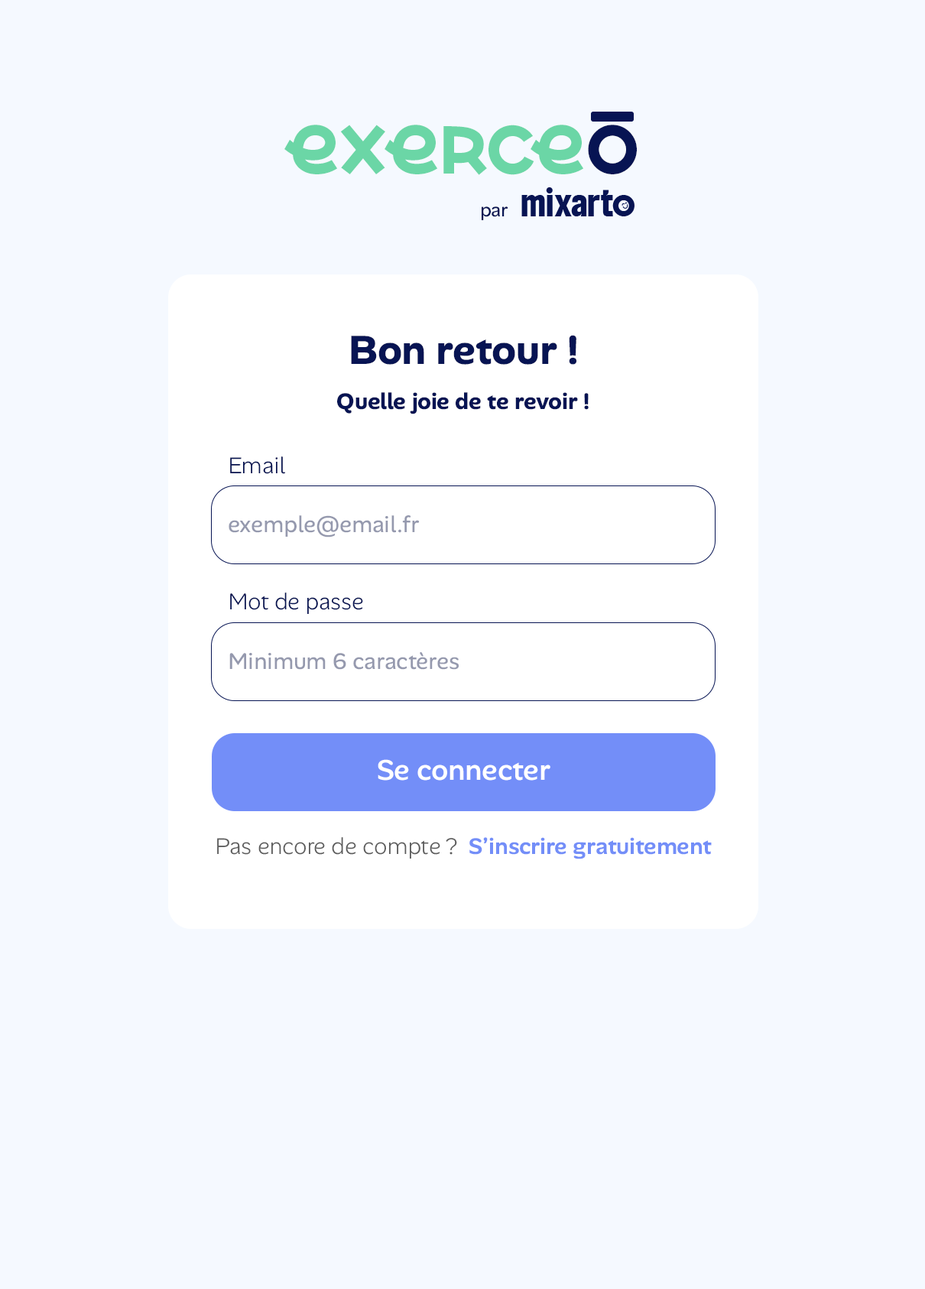
<style>
.page{position:relative;width:925px;height:1289px;background:#f5f9ff}
.page>*{position:absolute;margin:0}
.t1{font:67.8px "MoveSans-Bold";color:#6bd6a6}
.t2{font:67.8px "MoveSans-Bold";color:#071453}
.t3{font:19px "AlanSans-Regular";color:#071453}
.t4{font:41.3px "AlanSans-Bold";color:#071453}
.t5{font:23px "AlanSans-Bold";color:#071453}
.t6{font:23px "AlanSans-Light";color:#071453}
.t7{font:23px "AlanSans-Regular";color:#9599ae}
.t8{font:29.1px "AlanSans-Medium";color:#ffffff}
.t9{font:23px "AlanSans-SemiBold";color:#738ef8}
.t10{font:23px "AlanSans-Light";color:#5b5b5b}
</style>
<div class="page">
<p class="t1" style="left:284px;top:125px;width:353px;height:50px">exerce<span class="t2">o</span></p>
<p class="t3" style="left:482px;top:206px;width:26px;height:14px">par</p>
<p class="t4" style="left:351px;top:335px;width:225px;height:30px">Bon retour !</p>
<p class="t5" style="left:337px;top:392px;width:252px;height:22px">Quelle joie de te revoir !</p>
<p class="t6" style="left:230px;top:456px;width:55px;height:18px">Email</p>
<p class="t7" style="left:229px;top:515px;width:191px;height:22px">exemple@email.fr</p>
<p class="t6" style="left:230px;top:593px;width:133px;height:21px">Mot de passe</p>
<p class="t7" style="left:229px;top:652px;width:230px;height:18px">Minimum 6 caractères</p>
<p class="t8" style="left:378px;top:759px;width:172px;height:22px">Se connecter</p>
<p class="t9" style="left:217px;top:837px;width:495px;height:22px"><span class="t10">Pas encore de compte ?  </span>S’inscrire gratuitement</p>
</div>
